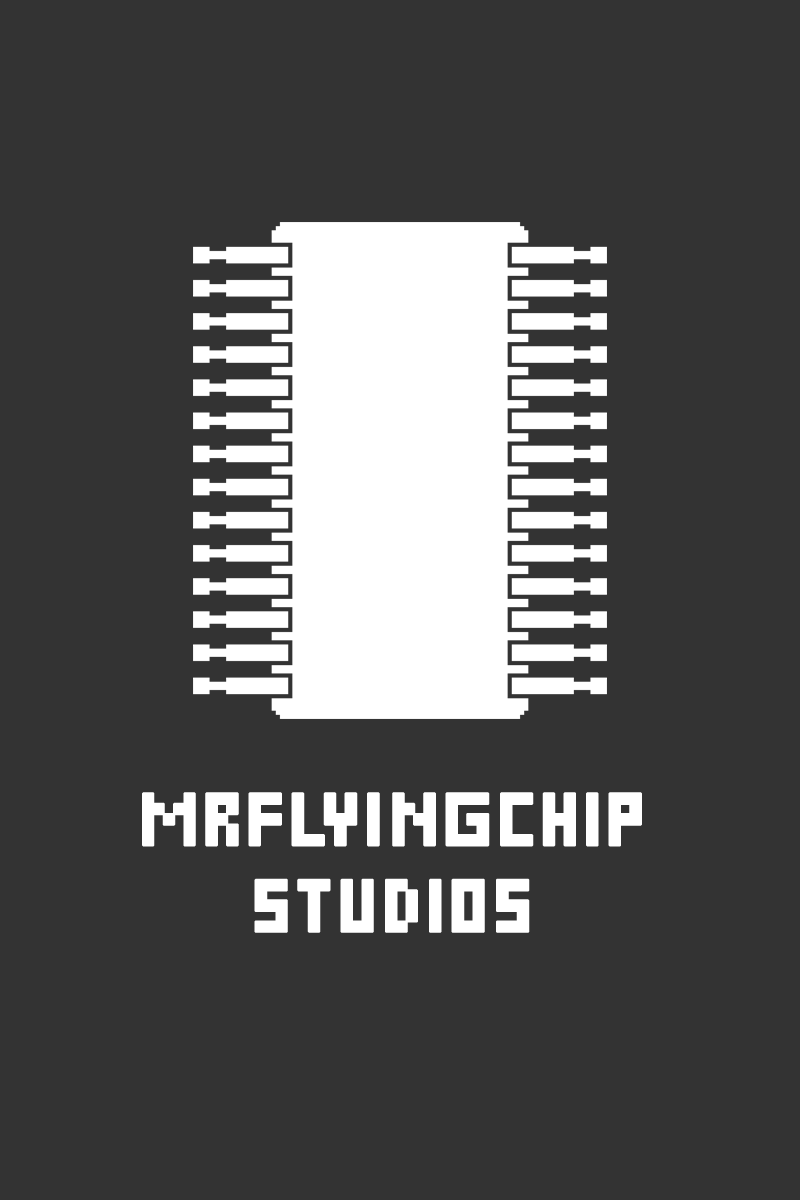
<style>
.page{position:relative;width:800px;height:1200px;background:#333333}
.page>*{position:absolute;margin:0}
.t1{font:72px "DSPixelCyr";letter-spacing:0.075em;color:#ffffff;font-weight:bold}
</style>
<div class="page">
<p class="t1" style="left:142px;top:792px;width:500px;height:141px;text-align:center">MRflyingchip<br>studios</p>
</div>
